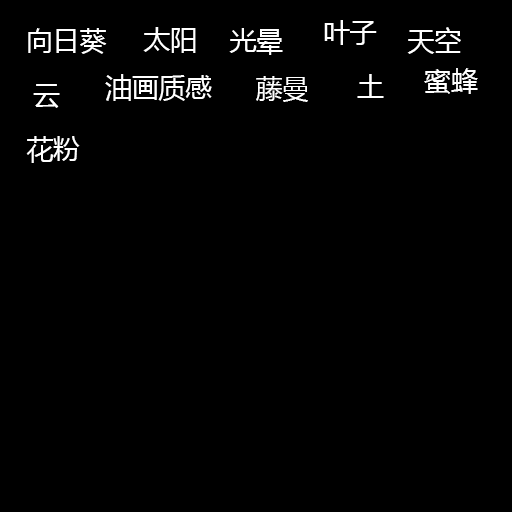
<style>
.page{position:relative;width:512px;height:512px;background:#000000}
.page>*{position:absolute;margin:0}
.t1{font:26.7px "MicrosoftYaHei";color:#ffffff;text-transform:uppercase}
</style>
<div class="page">
<p class="t1" style="left:28px;top:28px;width:79px;height:26px">向日葵</p>
<p class="t1" style="left:143px;top:27px;width:53px;height:26px">太阳</p>
<p class="t1" style="left:229px;top:28px;width:54px;height:27px">光晕</p>
<p class="t1" style="left:324px;top:20px;width:53px;height:25px">叶子</p>
<p class="t1" style="left:407px;top:27px;width:54px;height:27px">天空</p>
<p class="t1" style="left:105px;top:74px;width:107px;height:27px">油画质感</p>
<p class="t1" style="left:256px;top:76px;width:52px;height:26px">藤曼</p>
<p class="t1" style="left:357px;top:74px;width:27px;height:24px">土</p>
<p class="t1" style="left:424px;top:68px;width:54px;height:26px">蜜蜂</p>
<p class="t1" style="left:33px;top:84px;width:27px;height:24px">云</p>
<p class="t1" style="left:26px;top:136px;width:54px;height:27px">花粉</p>
</div>
